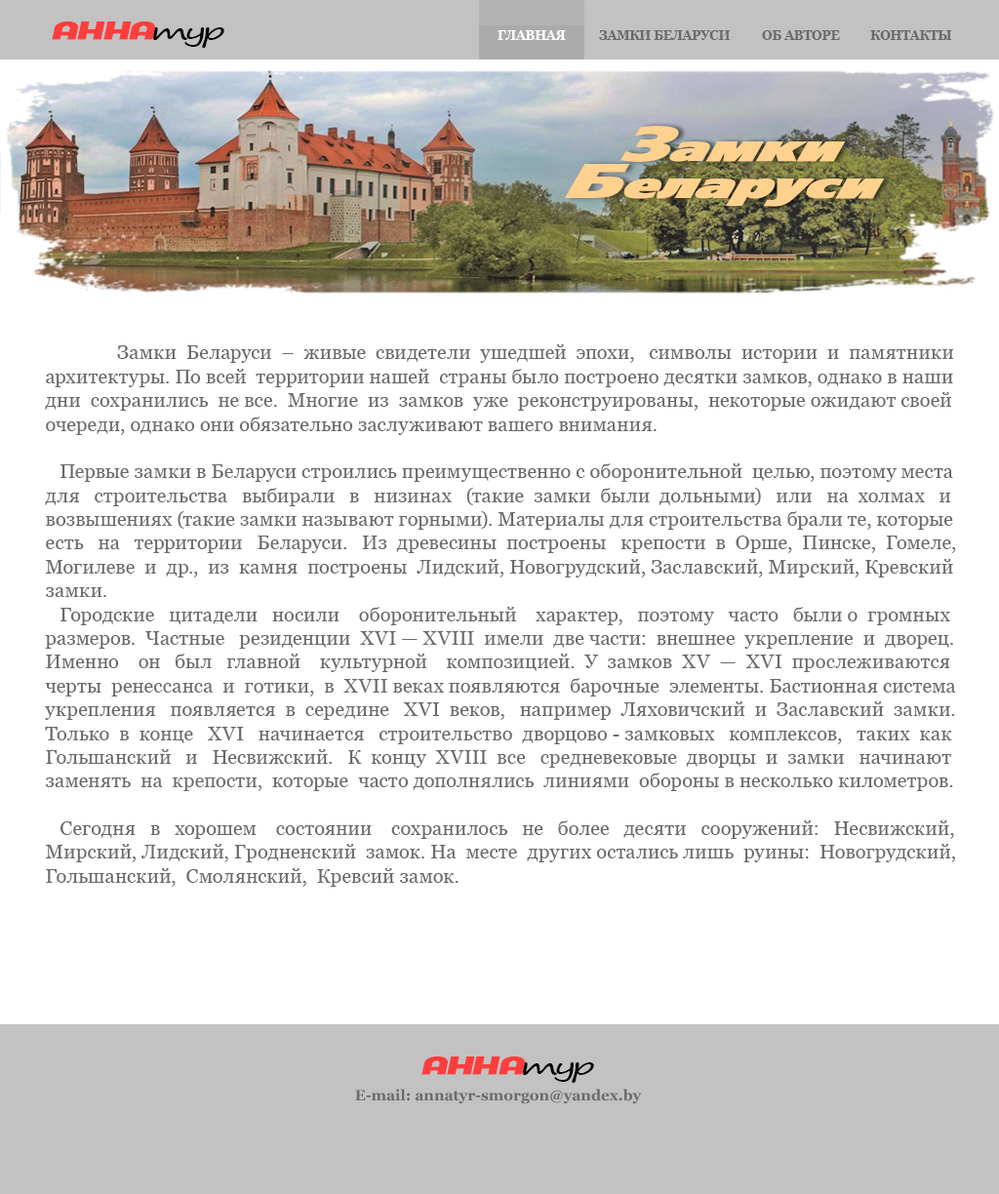
<style>
.page{position:relative;width:999px;height:1194px;background:#ffffff}
.page>*{position:absolute;margin:0}
.t1{font:24.8px "StudioGothicTrial-ExtraBoldItal";letter-spacing:-0.075em;color:#fd3e3e;font-weight:bold;scale:1.5 1}
.t2{font:24.8px "SegoePrint";letter-spacing:-0.1em;color:#000000;scale:1.5 1}
.t3{font:12.4px "Georgia-Bold";color:#fefefe;text-transform:uppercase}
.t4{font:12.4px "Georgia-Bold";color:#6a6a6a;text-transform:uppercase}
.t5{font:49.5px "AGForeignerXC-Italic";color:#fed18f;font-style:italic;scale:1.5 1}
.t6{font:37.2px "AGForeignerXC-Italic";color:#fed18f;font-weight:bold;font-style:italic;scale:1.5 1}
.t7{font:19.8px "Georgia";color:#6a6a6a}
.t8{font:14.9px "Georgia-Bold";color:#6a6a6a}
</style>
<div class="page">
<p class="t1" style="left:52px;top:21px;width:103px;height:19px">AHHA</p>
<p class="t2" style="left:153px;top:27px;width:71px;height:21px">тур</p>
<p class="t3" style="left:497px;top:30px;width:69px;height:10px">Главная</p>
<p class="t4" style="left:599px;top:30px;width:132px;height:10px">Замки Беларуси</p>
<p class="t4" style="left:762px;top:30px;width:78px;height:10px">Об авторе</p>
<p class="t4" style="left:870px;top:30px;width:82px;height:10px">Контакты</p>
<p class="t5" style="left:620px;top:126px;width:59px;height:36px">З</p>
<p class="t6" style="left:669px;top:141px;width:176px;height:21px">амки</p>
<p class="t5" style="left:565px;top:164px;width:65px;height:34px">Б</p>
<p class="t6" style="left:623px;top:178px;width:261px;height:29px">еларуси</p>
<p class="t7" style="left:45px;top:344px;width:911px;height:543px">Замки  Беларуси  –  живые  свидетели  ушедшей  эпохи,   символы  истории  и  памятники архитектуры. По всей  территории нашей  страны было построено десятки замков, однако в наши дни  сохранились  не все.  Многие  из  замков  уже  реконструированы,  некоторые ожидают своей очереди, однако они обязательно заслуживают вашего внимания.<br><br>   Первые замки в Беларуси строились преимущественно с оборонительной  целью, поэтому места для   строительства   выбирали   в   низинах   (такие  замки  были  дольными)   или   на  холмах   и возвышениях (такие замки называют горными). Материалы для строительства брали те, которые есть   на   территории   Беларуси.   Из  древесины  построены   крепости  в  Орше,  Пинске,  Гомеле, Могилеве  и  др.,  из  камня  построены  Лидский, Новогрудский, Заславский, Мирский, Кревский замки.<br>   Городские   цитадели   носили    оборонительный    характер,   поэтому   часто   были о  громных размеров.  Частные   резиденции  XVI — XVIII  имели  две части:  внешнее  укрепление  и  дворец. Именно    он   был   главной    культурной    композицией.  У  замков  XV  —  XVI  прослеживаются  черты  ренессанса  и  готики,  в  XVII веках появляются  барочные  элементы. Бастионная система укрепления   появляется  в  середине   XVI  веков,   например  Ляховичский  и  Заславский  замки. Только  в  конце   XVI   начинается   строительство  дворцово - замковых   комплексов,   таких  как Гольшанский   и   Несвижский.   К  концу  XVIII  все   средневековые  дворцы  и  замки   начинают заменять  на  крепости,  которые  часто дополнялись  линиями  обороны в несколько километров.<br><br>   Сегодня   в   хорошем    состоянии    сохранилось   не   более   десяти   сооружений:   Несвижский, Мирский, Лидский, Гродненский  замок. На  месте  других остались лишь  руины:  Новогрудский, Гольшанский,  Смолянский,  Кревсий замок.</p>
<p class="t1" style="left:421px;top:1056px;width:104px;height:19px">AHHA</p>
<p class="t2" style="left:523px;top:1062px;width:71px;height:21px">тур</p>
<p class="t8" style="left:355px;top:1089px;width:287px;height:15px">E-mail: annatyr-smorgon@yandex.by</p>
</div>
